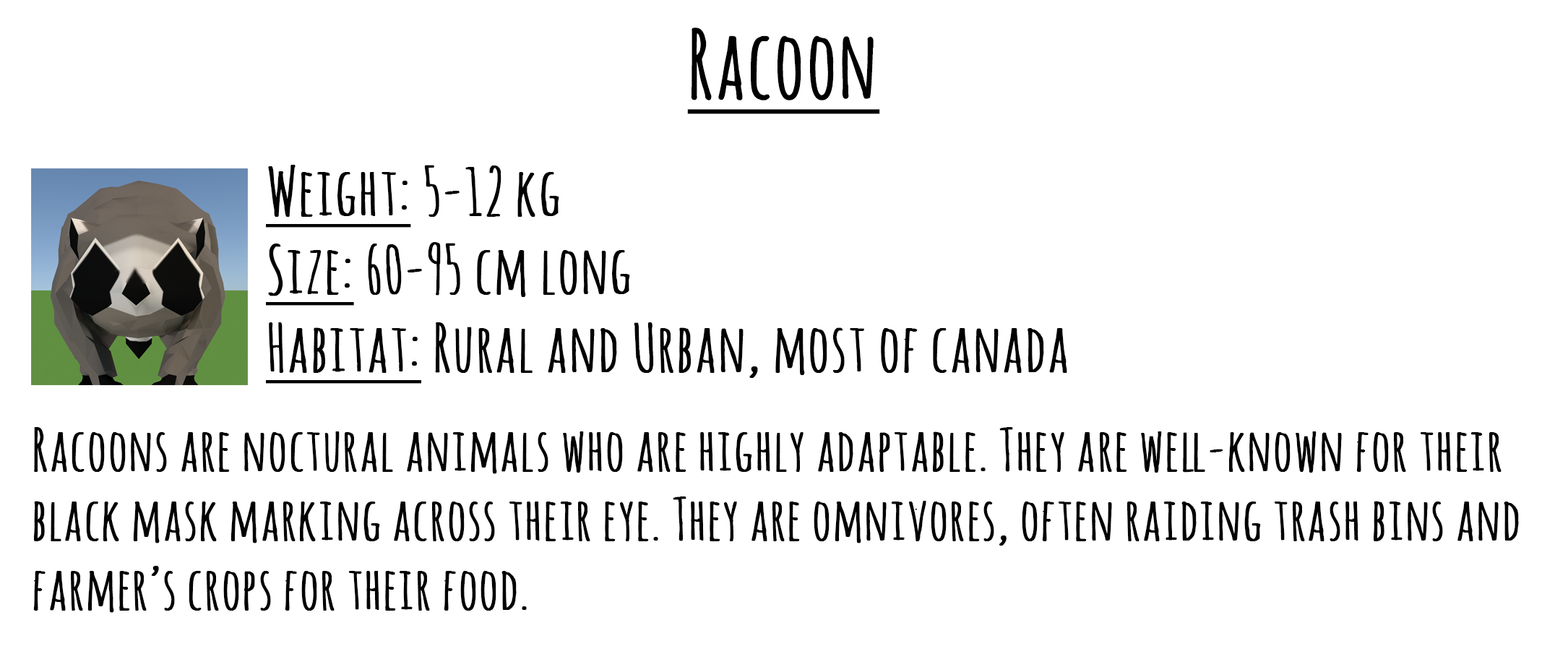
<style>
.page{position:relative;width:1568px;height:654px;background:#ffffff}
.page>*{position:absolute;margin:0}
.t1{font:90.3px "Amatic";color:#010101;font-weight:bold;text-decoration:underline}
.t2{font:65px "Amatic";color:#010101;font-weight:bold}
.t3{font:65px "Amatic";color:#010101;font-weight:bold;text-decoration:underline}
.t4{font:57.8px "Amatic";color:#010101;font-weight:bold}
</style>
<div class="page">
<p class="t1" style="left:687px;top:27px;width:193px;height:87px">Racoon</p>
<p class="t2" style="left:266px;top:165px;width:801px;height:219px"><span class="t3">Weight:</span> 5-12 kg<br><span class="t3">Size:</span> 60-95 cm long<br><span class="t3">Habitat:</span> Rural and Urban, most of canada</p>
<p class="t4" style="left:33px;top:427px;width:1486px;height:186px">Racoons are noctural animals who are highly adaptable. They are well-known for their black mask marking across their eye. They are omnivores, often raiding trash bins and farmer’s crops for their food.</p>
</div>
